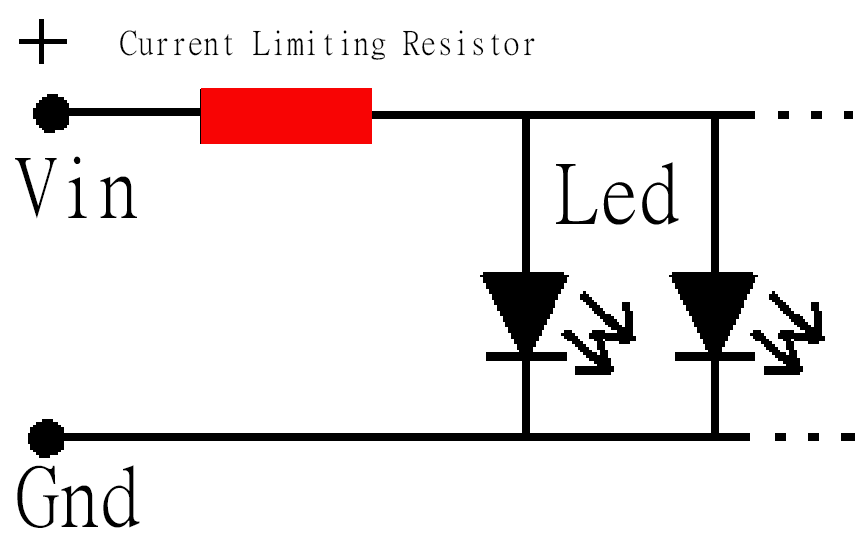
<style>
.page{position:relative;width:861px;height:544px;background:#ffffff}
.page>*{position:absolute;margin:0}
.t1{font:12px "MingLiU";color:#000000}
.t2{font:83.3px "MingLiU";color:#000000}
</style>
<div class="page">
<p class="t1" style="left:120px;top:30px;width:415px;height:30px">Current Limiting Resistor</p>
<p class="t2" style="left:15px;top:156px;width:122px;height:63px">Vin</p>
<p class="t2" style="left:17px;top:465px;width:123px;height:63px">Gnd</p>
</div>
